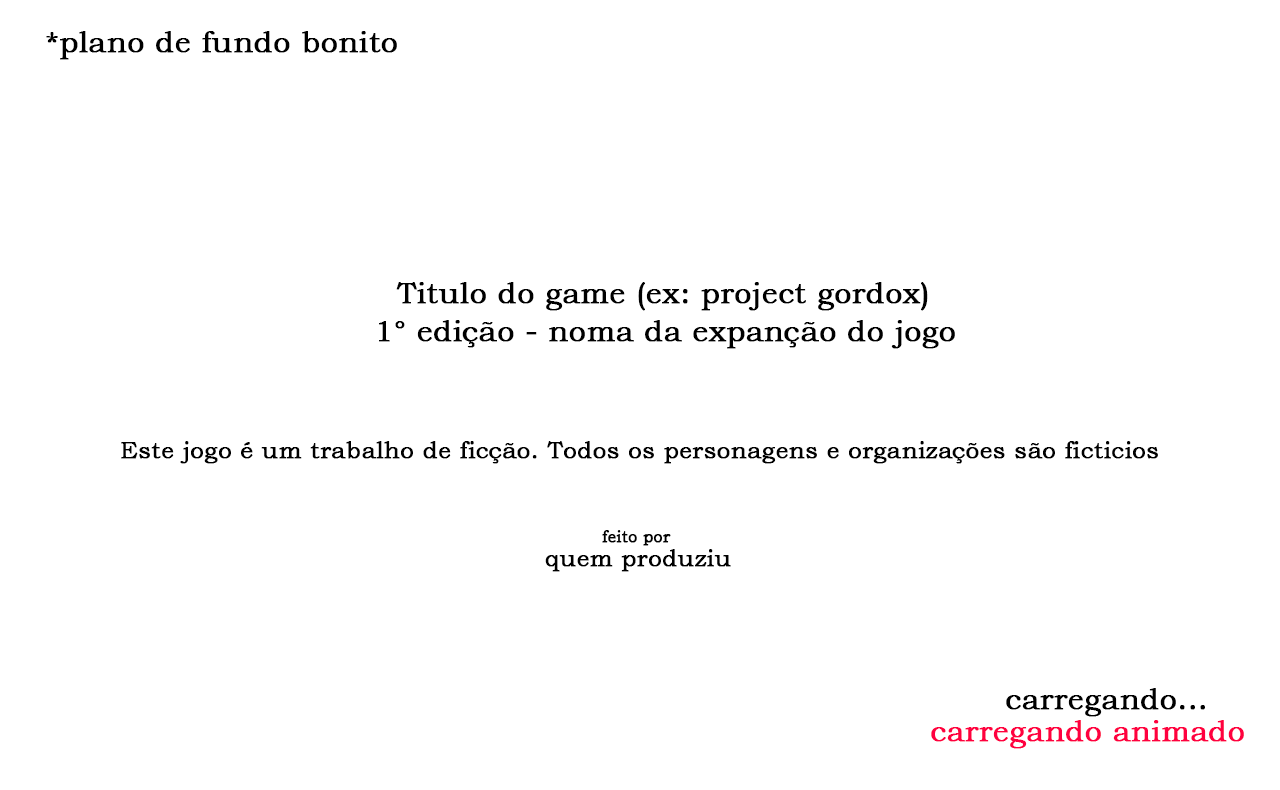
<style>
.page{position:relative;width:1280px;height:790px;background:#ffffff}
.page>*{position:absolute;margin:0}
.t1{font:30px "BookmanOldStyle";color:#000000;font-weight:bold}
.t2{font:24px "BookmanOldStyle";color:#000000;font-weight:bold}
.t3{font:16px "BookmanOldStyle";color:#000000;font-weight:bold}
.t4{font:30px "BookmanOldStyle";color:#ff0040;font-weight:bold}
</style>
<div class="page">
<p class="t1" style="left:46px;top:31px;width:351px;height:29px">*plano de fundo bonito</p>
<p class="t1" style="left:396px;top:282px;width:532px;height:29px">Titulo do game (ex: project gordox)</p>
<p class="t1" style="left:379px;top:320px;width:576px;height:29px">1° edição - noma da expanção do jogo</p>
<p class="t2" style="left:121px;top:441px;width:1037px;height:23px">Este jogo é um trabalho de ficção. Todos os personagens e organizações são ficticios</p>
<p class="t3" style="left:602px;top:530px;width:69px;height:16px">feito por</p>
<p class="t2" style="left:545px;top:549px;width:186px;height:23px">quem produziu</p>
<p class="t1" style="left:1006px;top:688px;width:199px;height:29px">carregando...</p>
<p class="t4" style="left:931px;top:720px;width:313px;height:29px">carregando animado</p>
</div>
